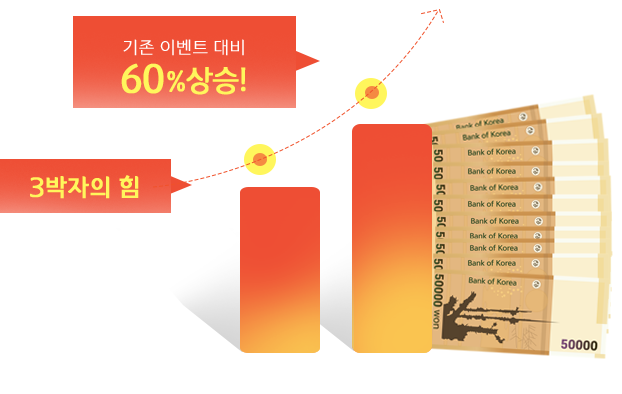
<style>
.page{position:relative;width:622px;height:394px;background:#ffffff}
.page>*{position:absolute;margin:0}
.t1{font:19.2px "YiSunShinDotumL";letter-spacing:-0.02em;color:#ffffff;font-weight:bold}
.t2{font:41.7px "12LotteMartDreamMedium";letter-spacing:-0.02em;color:#fff65c;font-weight:bold}
.t3{font:30px "12LotteMartDreamMedium";letter-spacing:-0.02em;color:#fff65c;font-weight:bold}
.t4{font:25px "12LotteMartDreamMedium";letter-spacing:-0.02em;color:#fff65c;font-weight:bold}
.t5{font:26.7px "YiSunShinDotumM";letter-spacing:-0.02em;color:#fff65c;font-weight:bold}
</style>
<div class="page">
<p class="t1" style="left:123px;top:39px;width:121px;height:17px">기존 이벤트 대비</p>
<p class="t2" style="left:121px;top:63px;width:43px;height:31px">60</p>
<p class="t3" style="left:167px;top:67px;width:79px;height:28px"><span class="t4">%</span>상승!</p>
<p class="t5" style="left:30px;top:175px;width:109px;height:24px">3박자의 힘</p>
</div>
